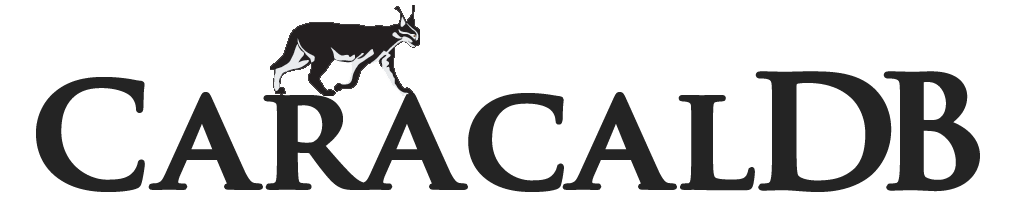
<style>
.page{position:relative;width:1013px;height:208px;background:#ffffff}
.page>*{position:absolute;margin:0}
.t1{font:142.5px "TrajanPro-Bold";color:#242424;font-weight:bold;scale:1.05 1}
.t2{font:152px "TrajanPro-Bold";color:#242424;font-weight:bold;scale:1.05 1}
</style>
<div class="page">
<p class="t1" style="left:36px;top:77px;width:719px;height:115px">Caracal</p>
<p class="t2" style="left:755px;top:71px;width:137px;height:121px">D</p>
<p class="t2" style="left:883px;top:71px;width:97px;height:121px">B</p>
</div>
